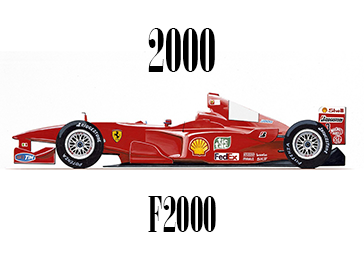
<style>
.page{position:relative;width:364px;height:255px;background:#ffffff}
.page>*{position:absolute;margin:0}
.t1{font:60px "Onyx";color:#000000}
.t2{font:48px "Onyx";color:#000000}
</style>
<div class="page">
<p class="t1" style="left:148px;top:28px;width:67px;height:44px">2000</p>
<p class="t2" style="left:148px;top:196px;width:68px;height:36px">F2000</p>
</div>
